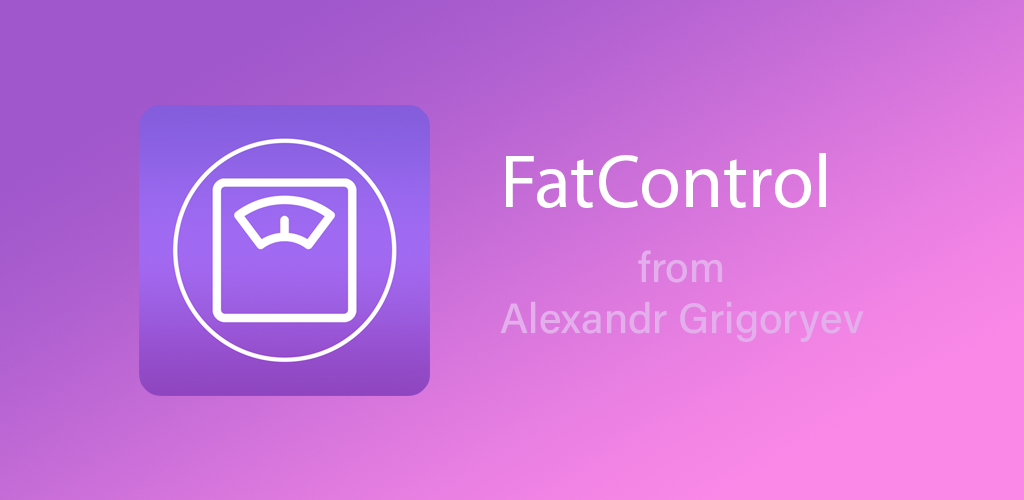
<style>
.page{position:relative;width:1024px;height:500px}
.page>*{position:absolute;margin:0}
.t1{font:76.4px "MyriadPro-Regular";color:#ffffff}
.t2{font:42.4px "AcuminConcept-Medium";color:#e4adec}
</style>
<div class="page">
<p class="t1" style="left:506px;top:153px;width:320px;height:55px">FatControl</p>
<p class="t2" style="left:500px;top:250px;width:364px;height:92px;text-align:center">from<br>Alexandr Grigoryev</p>
</div>
